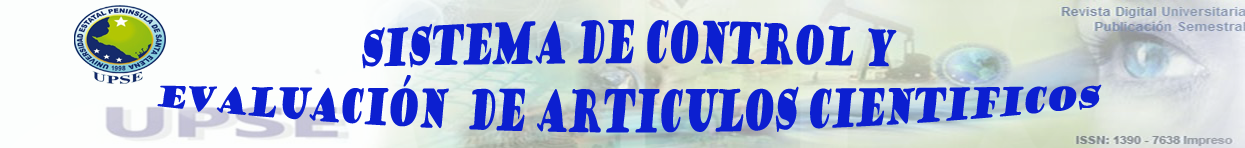
<style>
.page{position:relative;width:1245px;height:148px}
.page>*{position:absolute;margin:0}
.t1{font:26.7px "GoudyStout";letter-spacing:-0.1em;color:#0c1fd0;font-style:italic}
</style>
<div class="page">
<p class="t1" style="left:157px;top:19px;width:945px;height:114px;text-align:center">SISTEMA DE CONTROL Y <br>EVALUACIÓN  DE ARTICULOS CIENTIFICOS</p>
</div>
